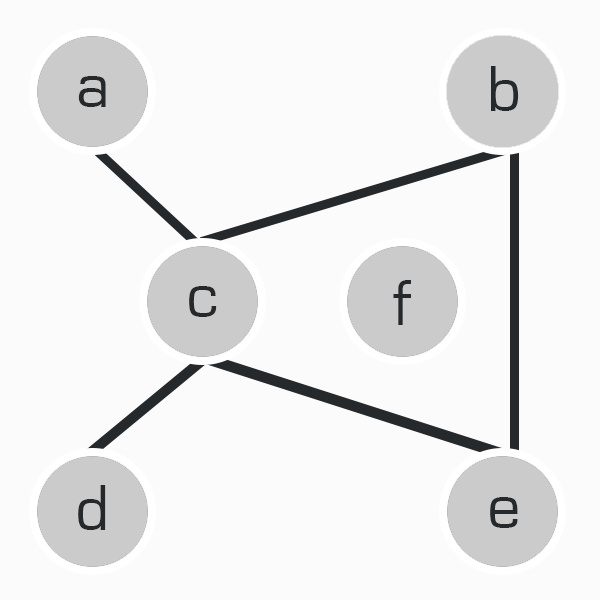
<style>
.page{position:relative;width:600px;height:600px;background:#fbfbfb}
.page>*{position:absolute;margin:0}
.t1{font:67.1px "EurostileRegular";color:#26292c}
</style>
<div class="page">
<p class="t1" style="left:78px;top:76px;width:28px;height:31px">a</p>
<p class="t1" style="left:491px;top:66px;width:28px;height:45px">b</p>
<p class="t1" style="left:393px;top:280px;width:18px;height:45px">f</p>
<p class="t1" style="left:189px;top:286px;width:28px;height:31px">c</p>
<p class="t1" style="left:78px;top:485px;width:28px;height:45px">d</p>
<p class="t1" style="left:490px;top:497px;width:28px;height:31px">e</p>
</div>
